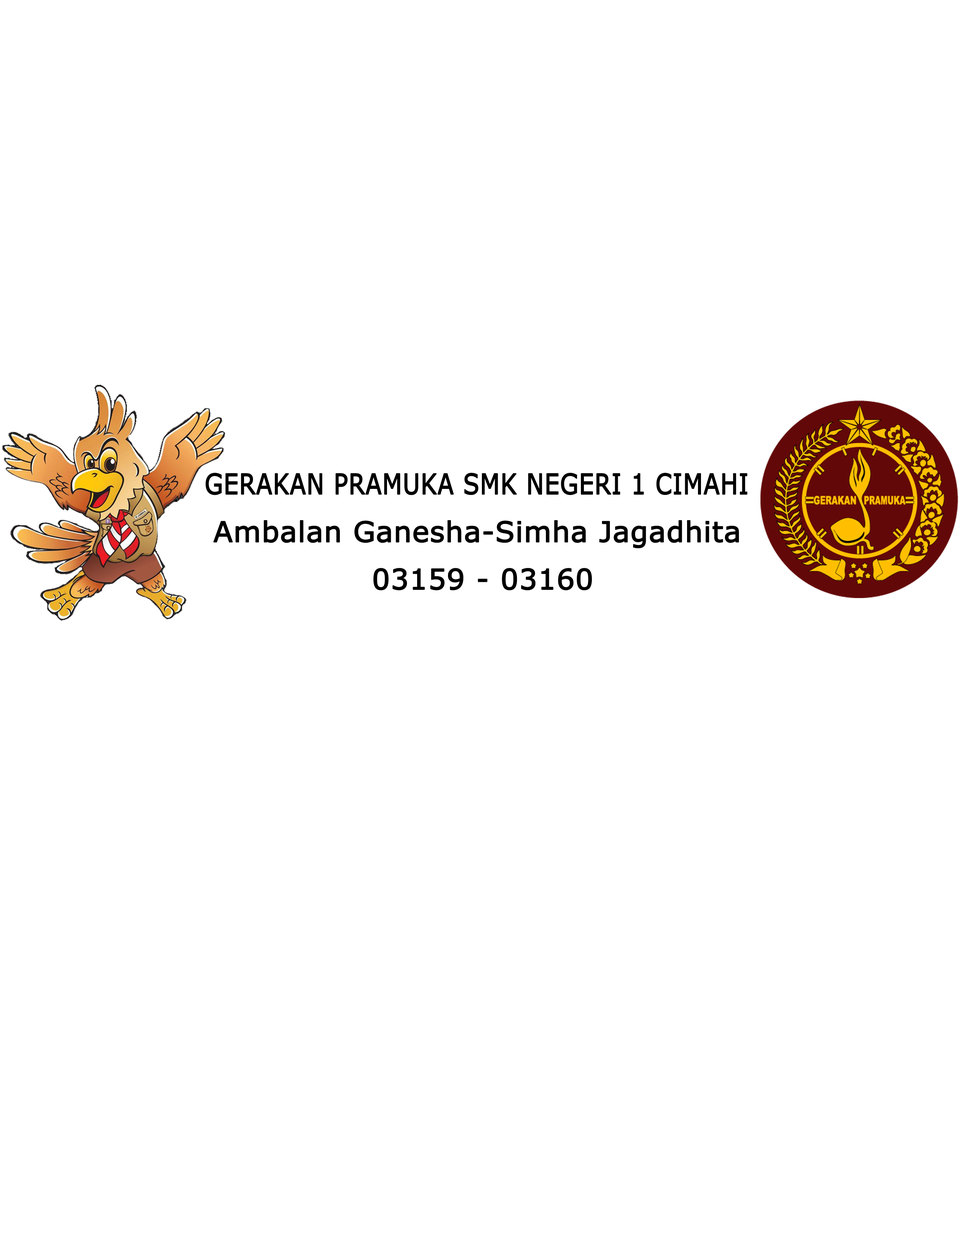
<style>
.page{position:relative;width:960px;height:1242px;background:#ffffff}
.page>*{position:absolute;margin:0}
.t1{font:28.2px "Verdana";color:#010000;font-weight:bold;scale:0.83 1}
.t2{font:28.2px "Verdana";color:#000000;font-weight:bold}
.t3{font:28.2px "Verdana";color:#010000;font-weight:bold}
</style>
<div class="page">
<p class="t1" style="left:206px;top:473px;width:541px;height:22px">GERAKAN PRAMUKA SMK NEGERI 1 CIMAHI</p>
<p class="t2" style="left:213px;top:520px;width:526px;height:28px">Ambalan Ganesha-Simha Jagadhita</p>
<p class="t3" style="left:373px;top:568px;width:219px;height:23px">03159 - 03160</p>
</div>
